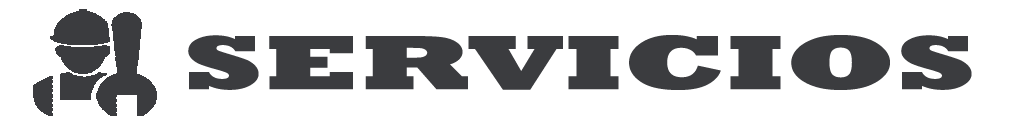
<style>
.page{position:relative;width:1020px;height:132px;background:#ffffff}
.page>*{position:absolute;margin:0}
.t1{font:78px "Rockwell-ExtraBold";color:#3b3c3f;scale:1.65 1}
</style>
<div class="page">
<p class="t1" style="left:188px;top:35px;width:784px;height:55px">SERVICIOS</p>
</div>
